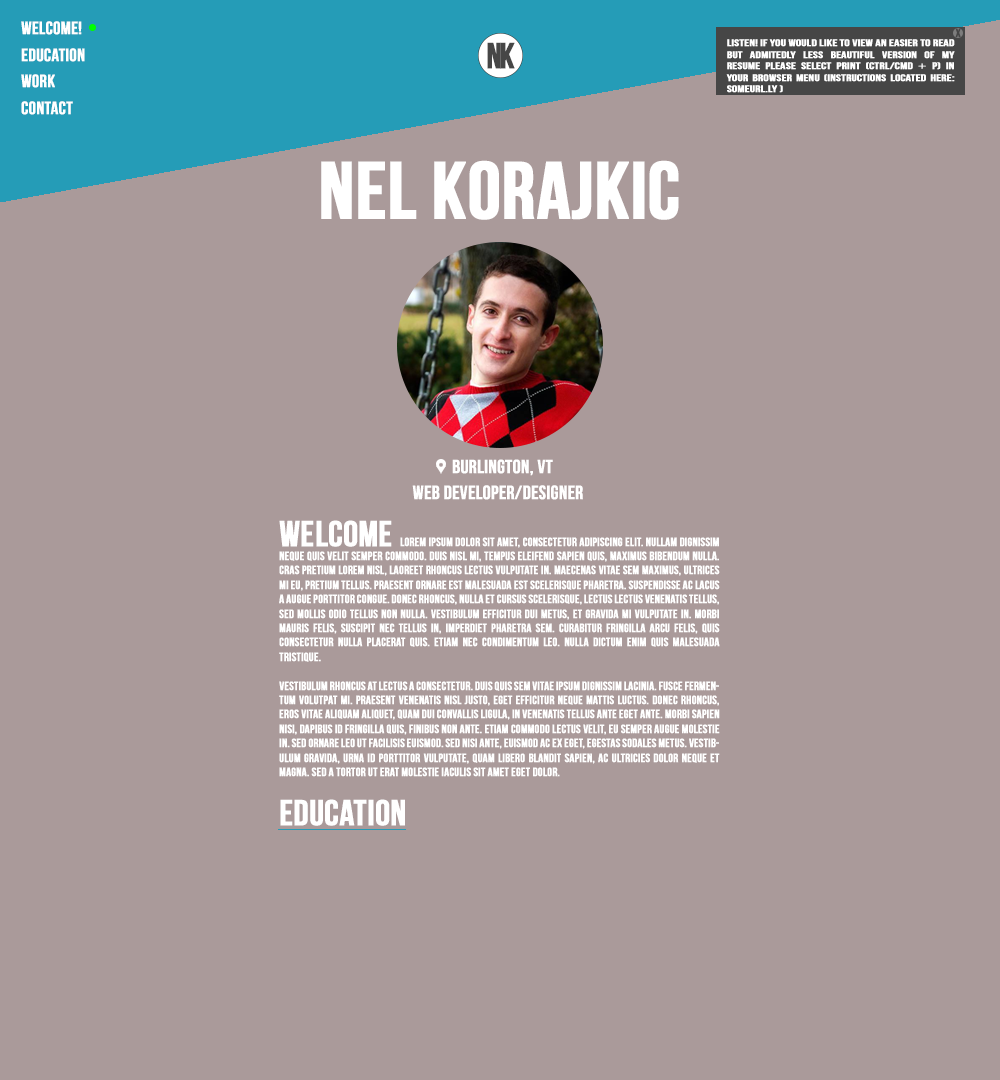
<style>
.page{position:relative;width:1000px;height:1080px;background:#aa9a9a}
.page>*{position:absolute;margin:0}
.t1{font:18px "BebasNeue";color:#ffffff;font-weight:bold}
.t2{font:12px "BebasNeue";color:#464646;font-weight:bold}
.t3{font:9.6px "BebasNeue";color:#ffffff;font-weight:bold;scale:1.33 1}
.t4{font:9.6px "Avenir-Light";color:#ffffff;font-weight:bold;scale:1.33 1}
.t5{font:36px "BebasNeue";letter-spacing:-0.1em;color:#464646;font-weight:bold}
.t6{font:80.7px "BebasNeue";color:#ffffff;font-weight:bold}
.t7{font:19px "BebasNeue";color:#ffffff;font-weight:bold}
.t8{font:19.4px "BebasNeue";color:#ffffff;font-weight:bold}
.t9{font:12px "BebasNeue";color:#ffffff;font-weight:bold}
.t10{font:36px "BebasNeue";color:#ffffff;font-weight:bold}
</style>
<div class="page">
<p class="t1" style="left:21px;top:21px;width:61px;height:14px">Welcome!</p>
<p class="t2" style="left:955px;top:28px;width:6px;height:10px">X</p>
<p class="t3" style="left:726px;top:39px;width:229px;height:54px;text-align:justify">listen! If you would like to view an easier to read but admitedly less beautiful version of my resume please select print (CTRL/CMD <span class="t4">+</span> P) in your browser menu (Instructions located here: someurl.ly )</p>
<p class="t1" style="left:21px;top:48px;width:64px;height:14px">Education</p>
<p class="t5" style="left:487px;top:42px;width:28px;height:27px">NK</p>
<p class="t1" style="left:21px;top:74px;width:34px;height:14px">Work</p>
<p class="t1" style="left:21px;top:101px;width:52px;height:14px">Contact</p>
<p class="t6" style="left:321px;top:160px;width:358px;height:60px">Nel Korajkic</p>
<p class="t7" style="left:452px;top:459px;width:101px;height:17px">burlington, VT</p>
<p class="t8" style="left:412px;top:485px;width:171px;height:15px">Web Developer/Designer</p>
<p class="t9" style="left:279px;top:520px;width:441px;height:257px;text-align:justify"><span class="t10">Welcome </span>Lorem ipsum dolor sit amet, consectetur adipiscing elit. Nullam dignissim neque quis velit semper commodo. Duis nisl mi, tempus eleifend sapien quis, maximus bibendum nulla. Cras pretium lorem nisl, laoreet rhoncus lectus vulputate in. Maecenas vitae sem maximus, ultrices mi eu, pretium tellus. Praesent ornare est malesuada est scelerisque pharetra. Suspendisse ac lacus a augue porttitor congue. Donec rhoncus, nulla et cursus scelerisque, lectus lectus venenatis tellus, sed mollis odio tellus non nulla. Vestibulum efficitur dui metus, et gravida mi vulputate in. Morbi mauris felis, suscipit nec tellus in, imperdiet pharetra sem. Curabitur fringilla arcu felis, quis consectetur nulla placerat quis. Etiam nec condimentum leo. Nulla dictum enim quis malesuada tristique.<br><br>Vestibulum rhoncus at lectus a consectetur. Duis quis sem vitae ipsum dignissim lacinia. Fusce fermentum volutpat mi. Praesent venenatis nisl justo, eget efficitur neque mattis luctus. Donec rhoncus, eros vitae aliquam aliquet, quam dui convallis ligula, in venenatis tellus ante eget ante. Morbi sapien nisi, dapibus id fringilla quis, finibus non ante. Etiam commodo lectus velit, eu semper augue molestie in. Sed ornare leo ut facilisis euismod. Sed nisi ante, euismod ac ex eget, egestas sodales metus. Vestibulum gravida, urna id porttitor vulputate, quam libero blandit sapien, ac ultricies dolor neque et magna. Sed a tortor ut erat molestie iaculis sit amet eget dolor.</p>
<p class="t10" style="left:280px;top:799px;width:125px;height:27px">Education</p>
</div>
